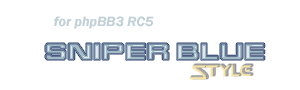
<style>
.page{position:relative;width:300px;height:90px;background:#ffffff}
.page>*{position:absolute;margin:0}
.t1{font:14px "FranklinGothic-DemiItalic";color:#c1d0d6}
.t2{font:14px "Star-Down-Regular";color:#f7e4a4}
</style>
<div class="page">
<p class="t1" style="left:54px;top:16px;width:100px;height:13px">for phpBB3 RC5</p>
<p class="t2" style="left:189px;top:65px;width:62px;height:15px">Style</p>
</div>
